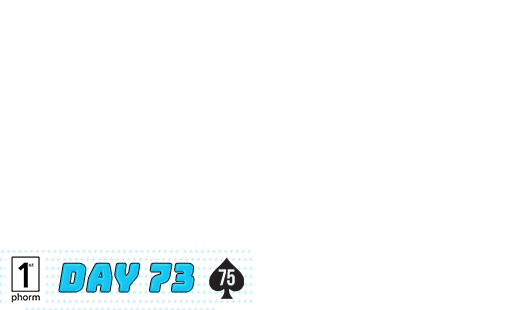
<style>
.page{position:relative;width:508px;height:310px;background:#ffffff}
.page>*{position:absolute;margin:0}
.t1{font:37.8px "Bungee-Regular";letter-spacing:0.02em;color:#18bfef;font-weight:bold;font-style:italic;scale:0.92 1}
</style>
<div class="page">
<p class="t1" style="left:59px;top:263px;width:135px;height:29px">DAY 73</p>
</div>
